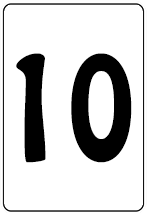
<style>
.page{position:relative;width:147px;height:213px;background:#ffffff}
.page>*{position:absolute;margin:0}
.t1{font:129.3px "HoboStd";color:#000000;scale:0.9 1}
</style>
<div class="page">
<p class="t1" style="left:16px;top:53px;width:116px;height:110px">10</p>
</div>
